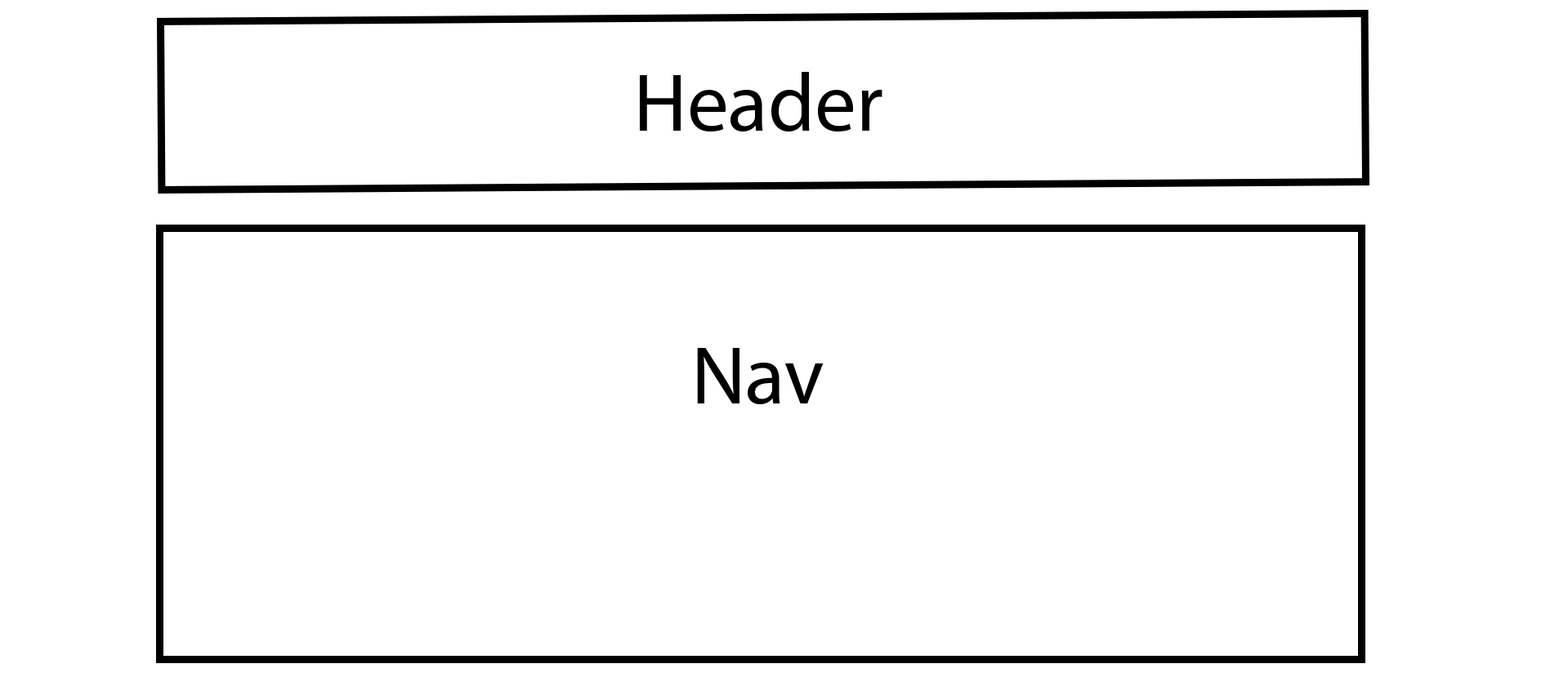
<style>
.page{position:relative;width:1568px;height:695px;background:#ffffff}
.page>*{position:absolute;margin:0}
.t1{font:82.5px "MyriadPro-Regular";color:#000000}
</style>
<div class="page">
<p class="t1" style="left:640px;top:72px;width:242px;height:60px">Header</p>
<p class="t1" style="left:697px;top:348px;width:127px;height:56px">Nav</p>
</div>
